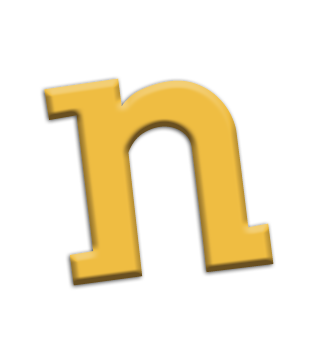
<style>
.page{position:relative;width:320px;height:352px;background:#ffffff}
.page>*{position:absolute;margin:0}
.t1{font:422px "FinkHeavy";color:#efbd42}
</style>
<div class="page">
<p class="t1" style="left:44px;top:78px;width:230px;height:208px;rotate:-7deg">n</p>
</div>
